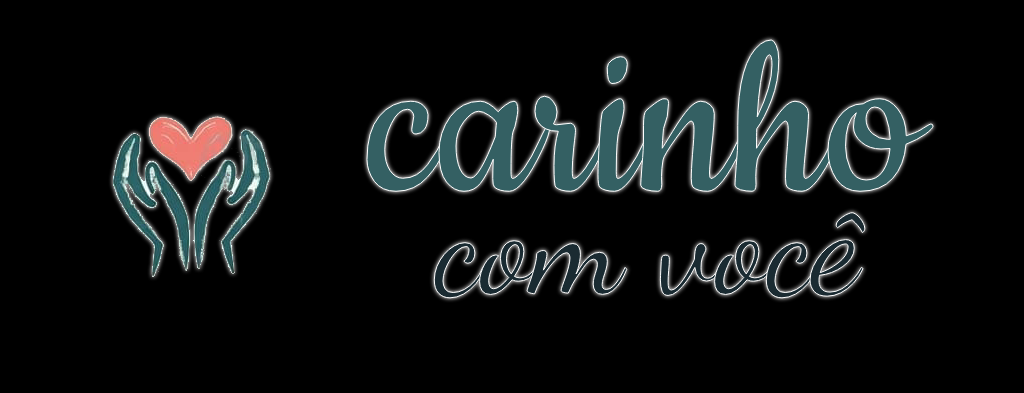
<style>
.page{position:relative;width:1024px;height:393px;background:#000000}
.page>*{position:absolute;margin:0}
.t1{font:250px "Cookie-Regular";color:#346063}
.t2{font:140px "DancingScript-Regular";color:#1a2b32}
</style>
<div class="page">
<p class="t1" style="left:366px;top:39px;width:568px;height:154px">carinho</p>
<p class="t2" style="left:433px;top:211px;width:433px;height:88px">com você</p>
</div>
